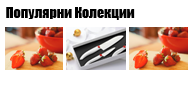
<style>
.page{position:relative;width:194px;height:95px;background:#ffffff}
.page>*{position:absolute;margin:0}
.t1{font:14px "Impact";color:#000000}
</style>
<div class="page">
<p class="t1" style="left:6px;top:7px;width:129px;height:13px">Популярни Колекции</p>
</div>
